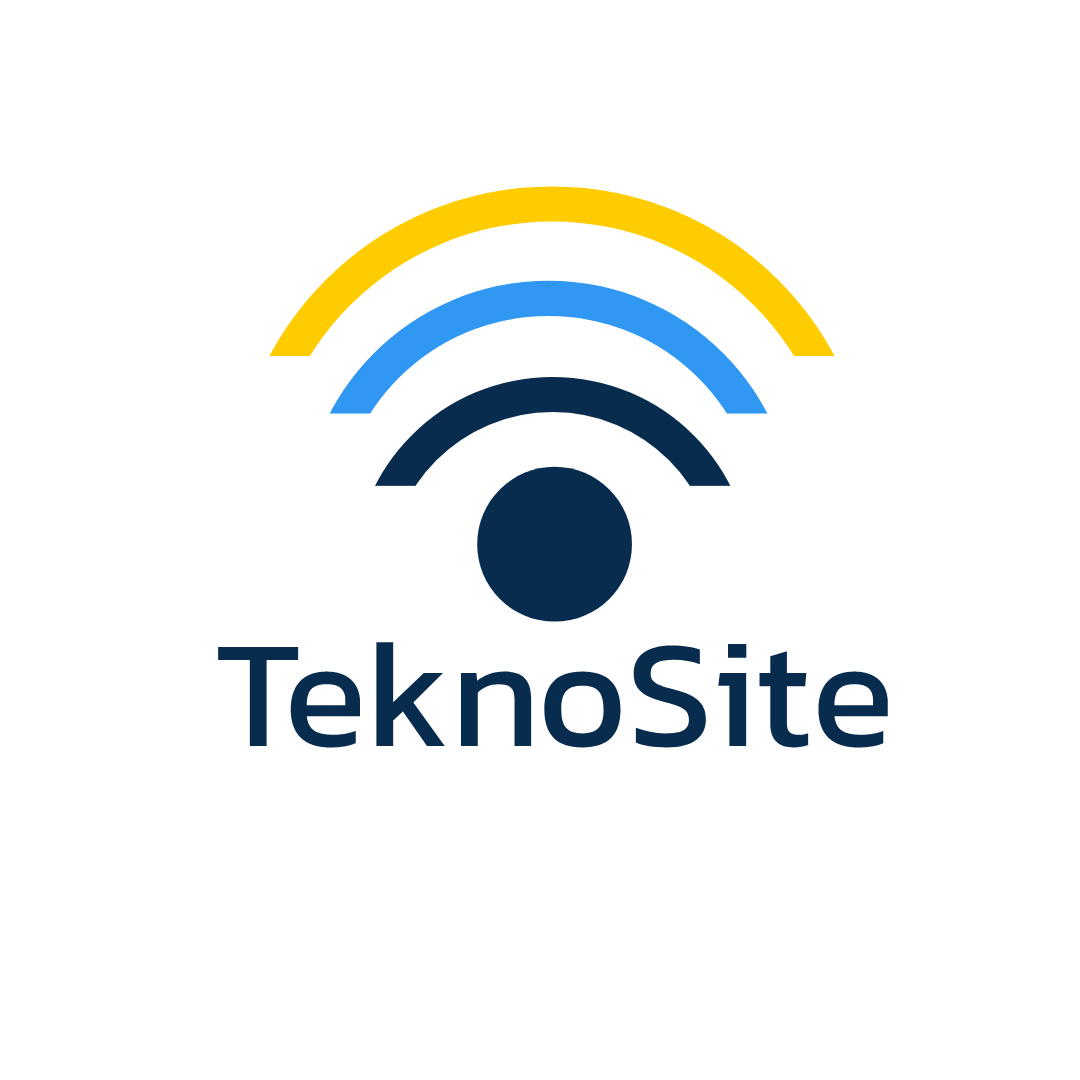
<style>
.page{position:relative;width:1080px;height:1080px;background:#ffffff}
.page>*{position:absolute;margin:0}
.t1{font:153.8px "Kanit-Regular";color:#082c4e}
</style>
<div class="page">
<p class="t1" style="left:218px;top:642px;width:670px;height:106px">TeknoSite</p>
</div>
